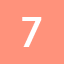
<style>
.page{position:relative;width:64px;height:64px;background:#ff927b}
.page>*{position:absolute;margin:0}
.t1{font:45.3px "Corbel-Bold";color:#ffffff}
</style>
<div class="page">
<p class="t1" style="left:22px;top:17px;width:20px;height:30px">7</p>
</div>
